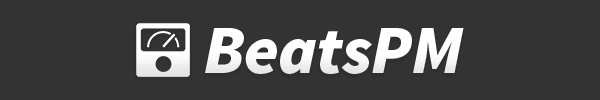
<style>
.page{position:relative;width:600px;height:100px;background:#333333}
.page>*{position:absolute;margin:0}
.t1{font:68.9px "SourceSansPro-BlackIt";letter-spacing:-0.01em;color:#ffffff}
</style>
<div class="page">
<p class="t1" style="left:205px;top:28px;width:259px;height:46px">BeatsPM</p>
</div>
